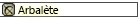
<style>
.page{position:relative;width:140px;height:19px;background:#ffffff}
.page>*{position:absolute;margin:0}
.t1{font:10.9px "LaoUI";color:#000000}
</style>
<div class="page">
<p class="t1" style="left:18px;top:5px;width:41px;height:9px">Arbalète</p>
</div>
